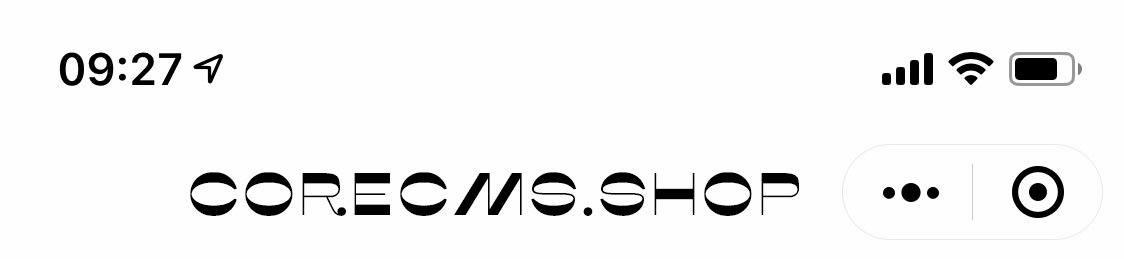
<style>
.page{position:relative;width:1124px;height:259px;background:#fefefe}
.page>*{position:absolute;margin:0}
.t1{font:60px "Misto-Regular";letter-spacing:0.1em;color:#000000}
</style>
<div class="page">
<p class="t1" style="left:190px;top:172px;width:609px;height:44px">CoreCMs.Shop</p>
</div>
